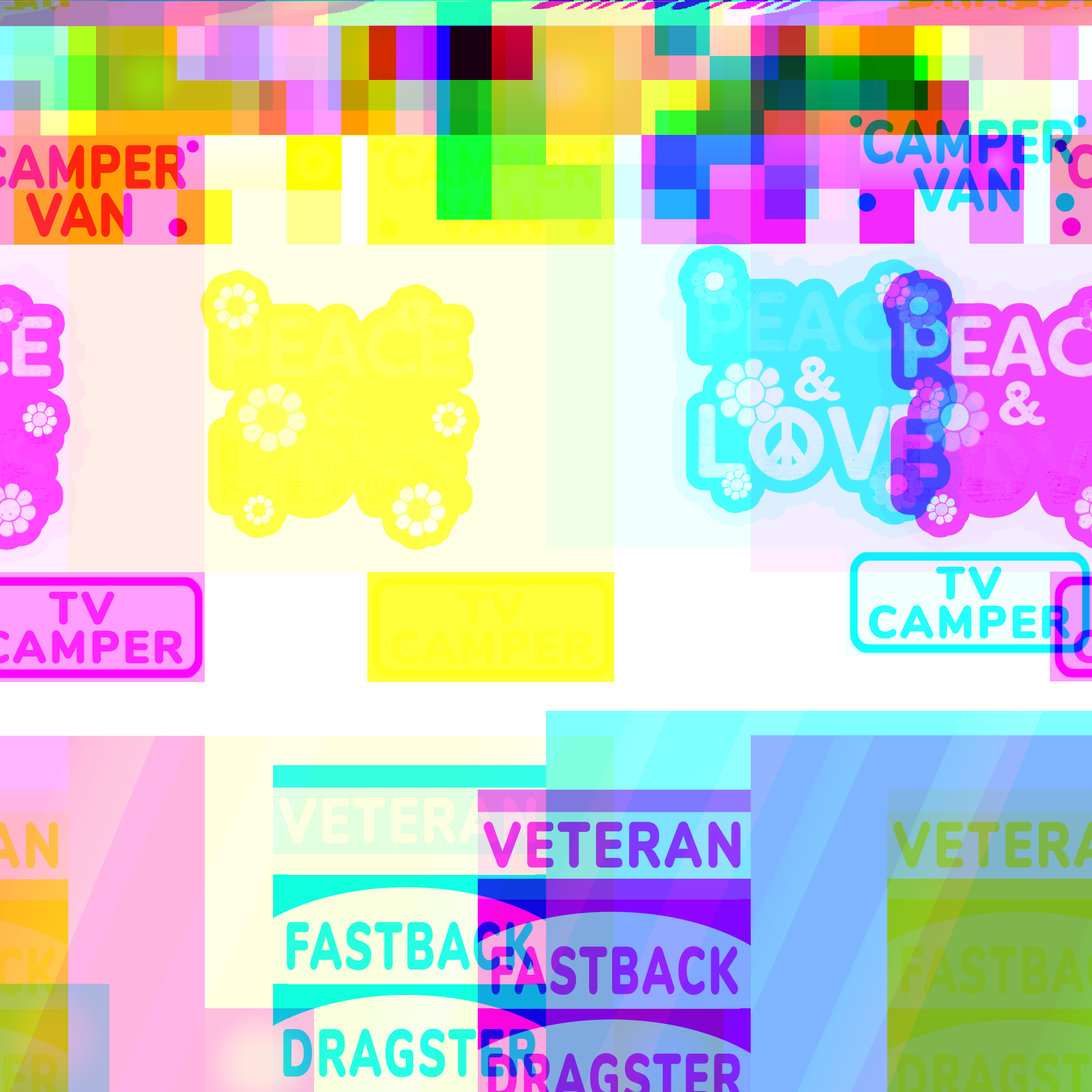
<style>
.page{position:relative;width:1092px;height:1092px}
.page>*{position:absolute;margin:0}
.t1{font:60.7px "Nunito-Black";text-transform:uppercase;font-weight:bold;scale:0.8 1}
.t2{font:45.7px/38.9px "Nunito-Black";letter-spacing:0.04em;color:#25ffff;text-transform:uppercase;font-weight:bold;scale:0.97 1}
.t3{font:64px "Nunito-Black";letter-spacing:0.04em;color:#fcffdf;text-transform:uppercase;font-weight:bold;scale:0.78 1}
.t4{font:66.6px "Nunito-Black";letter-spacing:0.04em;color:#25ffdf;text-transform:uppercase;font-weight:bold;scale:0.64 1}
.t5{font:66.6px "Nunito-Black";letter-spacing:0.04em;font-weight:bold;scale:0.64 1}
.t6{font:58.7px "Nunito-Black";letter-spacing:0.04em;font-weight:bold;scale:0.64 1}
</style>
<div class="page">
<p class="t1" style="left:863px;top:118px;width:210px;height:93px">Camper van</p>
<p class="t2" style="left:869px;top:565px;width:201px;height:73px;text-align:center">TV<br>Camper</p>
<p class="t3" style="left:279px;top:796px;width:257px;height:46px">veteran</p>
<p class="t4" style="left:287px;top:920px;width:246px;height:49px">fastback</p>
<p class="t5" style="left:283px;top:1027px;width:253px;height:50px"><span class="t6"><br></span>DRAGSTER</p>
</div>
